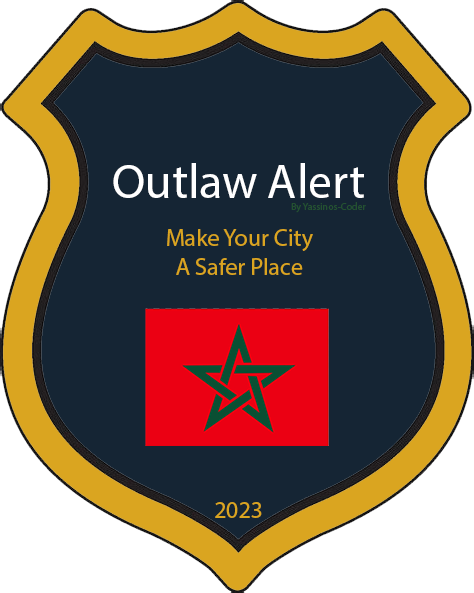
<style>
.page{position:relative;width:474px;height:593px;background:#152534}
.page>*{position:absolute;margin:0}
.t1{font:48px "MyriadPro-Regular";color:#ffffff}
.t2{font:10px "MyriadPro-Regular";color:#245131}
.t3{font:24px "MyriadPro-Regular";color:#daa520}
</style>
<div class="page">
<p class="t1" style="left:113px;top:163px;width:251px;height:35px">Outlaw Alert</p>
<p class="t2" style="left:291px;top:202px;width:75px;height:11px">By Yassinos-Coder</p>
<p class="t3" style="left:167px;top:229px;width:146px;height:46px">Make Your City <br>  A Safer Place</p>
<p class="t3" style="left:215px;top:502px;width:47px;height:16px">2023</p>
</div>
